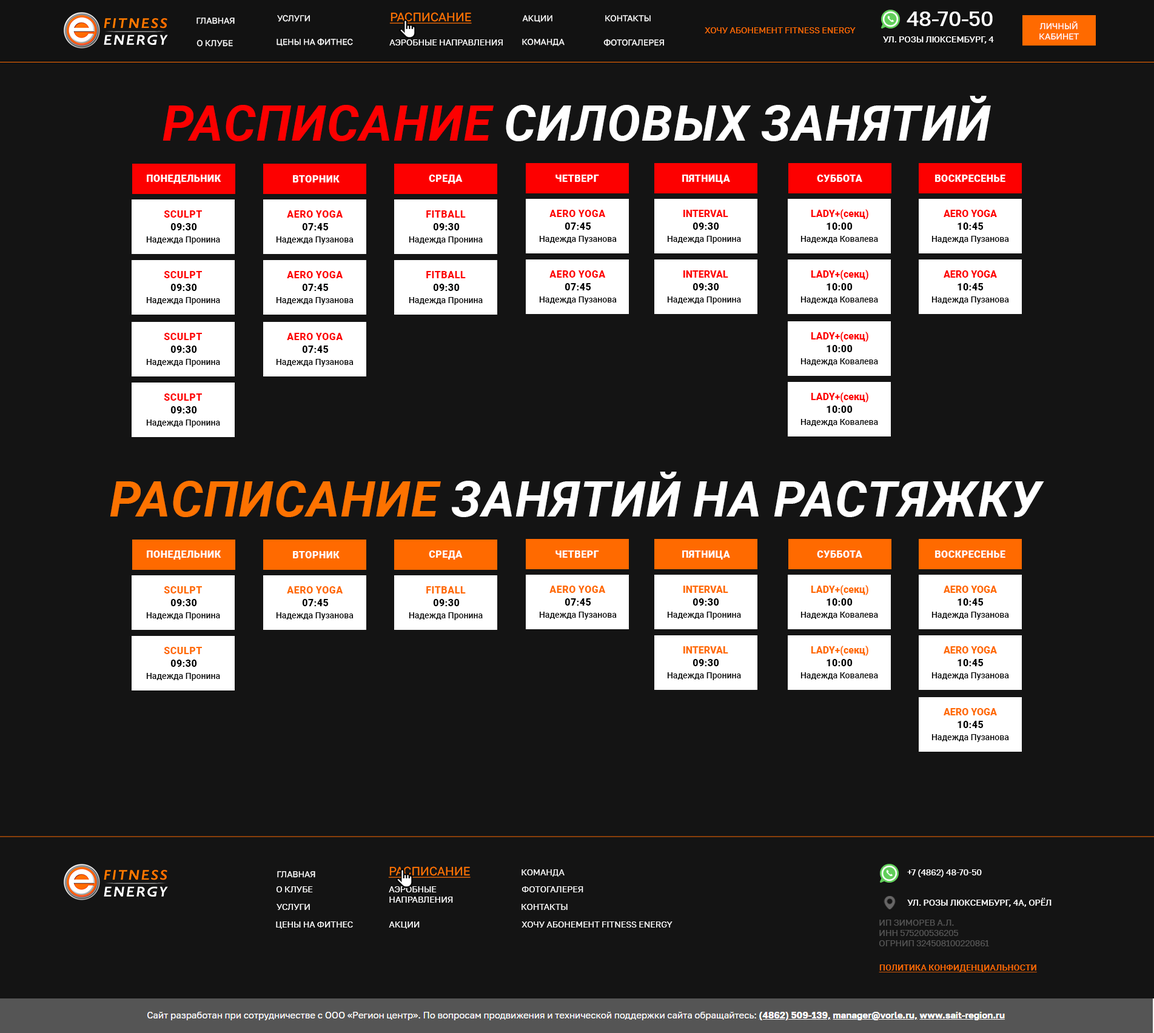
<style>
.page{position:relative;width:1154px;height:1033px;background:#141414}
.page>*{position:absolute;margin:0}
.t1{font:8.5px "GolosText-Regular";letter-spacing:-0.015em;color:#ffffff;text-transform:uppercase}
.t2{font:12.1px "GolosText-Regular";letter-spacing:-0.015em;color:#fd7200;text-transform:uppercase;text-decoration:underline}
.t3{font:20.6px "GolosText-Medium";letter-spacing:-0.015em;color:#ffffff}
.t4{font:8.5px "GolosText-Regular";letter-spacing:-0.015em;color:#ff6a00;text-transform:uppercase}
.t5{font:8.5px "GolosText-Medium";letter-spacing:-0.015em;color:#ffffff;text-transform:uppercase}
.t6{font:49.7px "Roboto-BoldItalic";letter-spacing:-0.015em;color:#ffffff;text-transform:uppercase}
.t7{font:49.7px "Roboto-BoldItalic";letter-spacing:-0.015em;color:#fd0000;text-transform:uppercase}
.t8{font:9.7px "Roboto-Black";color:#ffffff;text-transform:uppercase}
.t9{font:9.7px "Roboto-Black";color:#fd0000;text-transform:uppercase}
.t10{font:9.7px "Roboto-Black";color:#fd0000}
.t11{font:9.7px "Roboto-Black";color:#000000;text-transform:uppercase}
.t12{font:8.5px "Roboto-Medium";color:#000000}
.t13{font:49.7px "Roboto-BoldItalic";letter-spacing:-0.015em;color:#fd7200;text-transform:uppercase}
.t14{font:9.7px "Roboto-Black";color:#ff6a00;text-transform:uppercase}
.t15{font:9.7px "Roboto-Black";color:#ff6a00}
.t16{font:8.5px "GolosText-Medium";letter-spacing:-0.015em;color:#ffffff}
.t17{font:8.5px "GolosText-Regular";letter-spacing:-0.015em;color:#555555;text-transform:uppercase}
.t18{font:8.5px "Roboto-Medium";letter-spacing:-0.015em;color:#ff6a00;text-transform:uppercase;text-decoration:underline}
</style>
<div class="page">
<p class="t1" style="left:196px;top:18px;width:39px;height:6px">Главная</p>
<p class="t1" style="left:277px;top:15px;width:33px;height:7px">Услуги</p>
<p class="t2" style="left:389px;top:12px;width:83px;height:12px">Расписание</p>
<p class="t1" style="left:522px;top:15px;width:30px;height:7px">Акции</p>
<p class="t1" style="left:605px;top:15px;width:46px;height:7px">Контакты</p>
<p class="t3" style="left:907px;top:12px;width:86px;height:14px">48-70-50</p>
<p class="t4" style="left:705px;top:27px;width:151px;height:6px">Хочу абонемент Fitness Energy</p>
<p class="t1" style="left:1039px;top:21px;width:40px;height:19px;text-align:center">Личный<br>кабинет</p>
<p class="t1" style="left:196px;top:39px;width:37px;height:8px">О клубе</p>
<p class="t1" style="left:277px;top:38px;width:76px;height:8px">Цены на фитнес</p>
<p class="t1" style="left:389px;top:39px;width:114px;height:6px">аэробные направления</p>
<p class="t1" style="left:522px;top:38px;width:43px;height:8px">Команда</p>
<p class="t1" style="left:603px;top:39px;width:61px;height:7px">Фотогалерея</p>
<p class="t5" style="left:883px;top:36px;width:111px;height:8px">ул. Розы Люксембург, 4</p>
<p class="t6" style="left:163px;top:96px;width:828px;height:45px"><span class="t7">расписание</span> силовых занятий</p>
<p class="t8" style="left:147px;top:175px;width:74px;height:9px">понедельник</p>
<p class="t8" style="left:293px;top:175px;width:47px;height:8px">вторник</p>
<p class="t8" style="left:429px;top:175px;width:34px;height:9px">среда</p>
<p class="t8" style="left:555px;top:175px;width:44px;height:7px">четверг</p>
<p class="t8" style="left:682px;top:175px;width:48px;height:9px">пятница</p>
<p class="t8" style="left:817px;top:175px;width:45px;height:7px">суббота</p>
<p class="t8" style="left:935px;top:175px;width:70px;height:7px">воскресенье</p>
<p class="t9" style="left:549px;top:210px;width:57px;height:7px">AERO YOGA</p>
<p class="t10" style="left:683px;top:210px;width:45px;height:7px">INTERVAL</p>
<p class="t10" style="left:811px;top:209px;width:57px;height:11px">LADY+(секц)</p>
<p class="t10" style="left:944px;top:210px;width:53px;height:7px">AERO YOGA</p>
<p class="t9" style="left:164px;top:210px;width:38px;height:8px">SCULPT</p>
<p class="t9" style="left:287px;top:210px;width:56px;height:8px">AERO YOGA</p>
<p class="t9" style="left:426px;top:210px;width:40px;height:8px">FITBALL</p>
<p class="t11" style="left:170px;top:223px;width:27px;height:7px">09:30</p>
<p class="t11" style="left:302px;top:223px;width:27px;height:7px">07:45</p>
<p class="t11" style="left:433px;top:223px;width:27px;height:7px">09:30</p>
<p class="t11" style="left:565px;top:223px;width:26px;height:7px">07:45</p>
<p class="t11" style="left:693px;top:223px;width:26px;height:7px">09:30</p>
<p class="t11" style="left:827px;top:223px;width:26px;height:7px">10:00</p>
<p class="t11" style="left:958px;top:223px;width:26px;height:7px">10:45</p>
<p class="t12" style="left:146px;top:236px;width:74px;height:8px">Надежда Пронина</p>
<p class="t12" style="left:276px;top:236px;width:78px;height:8px">Надежда Пузанова</p>
<p class="t12" style="left:409px;top:236px;width:74px;height:8px">Надежда Пронина</p>
<p class="t12" style="left:539px;top:236px;width:78px;height:8px">Надежда Пузанова</p>
<p class="t12" style="left:667px;top:236px;width:74px;height:8px">Надежда Пронина</p>
<p class="t12" style="left:800px;top:236px;width:78px;height:7px">Надежда Ковалева</p>
<p class="t12" style="left:931px;top:236px;width:78px;height:8px">Надежда Пузанова</p>
<p class="t10" style="left:811px;top:270px;width:57px;height:10px">LADY+(секц)</p>
<p class="t9" style="left:164px;top:271px;width:38px;height:7px">SCULPT</p>
<p class="t9" style="left:287px;top:271px;width:56px;height:7px">AERO YOGA</p>
<p class="t9" style="left:426px;top:271px;width:40px;height:7px">FITBALL</p>
<p class="t9" style="left:549px;top:270px;width:57px;height:8px">AERO YOGA</p>
<p class="t10" style="left:683px;top:270px;width:45px;height:8px">INTERVAL</p>
<p class="t10" style="left:944px;top:270px;width:53px;height:8px">AERO YOGA</p>
<p class="t11" style="left:170px;top:284px;width:27px;height:7px">09:30</p>
<p class="t11" style="left:302px;top:284px;width:27px;height:7px">07:45</p>
<p class="t11" style="left:433px;top:284px;width:27px;height:7px">09:30</p>
<p class="t11" style="left:565px;top:283px;width:26px;height:7px">07:45</p>
<p class="t11" style="left:693px;top:283px;width:26px;height:7px">09:30</p>
<p class="t11" style="left:827px;top:283px;width:26px;height:7px">10:00</p>
<p class="t11" style="left:958px;top:283px;width:26px;height:7px">10:45</p>
<p class="t12" style="left:146px;top:297px;width:74px;height:8px">Надежда Пронина</p>
<p class="t12" style="left:276px;top:297px;width:78px;height:8px">Надежда Пузанова</p>
<p class="t12" style="left:409px;top:297px;width:74px;height:8px">Надежда Пронина</p>
<p class="t12" style="left:539px;top:297px;width:78px;height:7px">Надежда Пузанова</p>
<p class="t12" style="left:667px;top:297px;width:74px;height:7px">Надежда Пронина</p>
<p class="t12" style="left:800px;top:297px;width:78px;height:7px">Надежда Ковалева</p>
<p class="t12" style="left:931px;top:297px;width:78px;height:7px">Надежда Пузанова</p>
<p class="t9" style="left:164px;top:333px;width:38px;height:7px">SCULPT</p>
<p class="t9" style="left:287px;top:333px;width:56px;height:7px">AERO YOGA</p>
<p class="t10" style="left:811px;top:332px;width:57px;height:10px">LADY+(секц)</p>
<p class="t11" style="left:170px;top:346px;width:27px;height:7px">09:30</p>
<p class="t11" style="left:302px;top:346px;width:27px;height:7px">07:45</p>
<p class="t11" style="left:827px;top:345px;width:26px;height:7px">10:00</p>
<p class="t12" style="left:146px;top:359px;width:74px;height:8px">Надежда Пронина</p>
<p class="t12" style="left:276px;top:359px;width:78px;height:8px">Надежда Пузанова</p>
<p class="t12" style="left:800px;top:358px;width:78px;height:8px">Надежда Ковалева</p>
<p class="t9" style="left:164px;top:394px;width:38px;height:7px">SCULPT</p>
<p class="t10" style="left:811px;top:392px;width:57px;height:11px">LADY+(секц)</p>
<p class="t11" style="left:170px;top:406px;width:27px;height:8px">09:30</p>
<p class="t11" style="left:827px;top:406px;width:26px;height:7px">10:00</p>
<p class="t12" style="left:146px;top:420px;width:74px;height:8px">Надежда Пронина</p>
<p class="t12" style="left:800px;top:419px;width:78px;height:7px">Надежда Ковалева</p>
<p class="t6" style="left:110px;top:472px;width:934px;height:45px"><span class="t13">расписание</span> занятий на растяжку</p>
<p class="t8" style="left:147px;top:551px;width:74px;height:9px">понедельник</p>
<p class="t8" style="left:293px;top:551px;width:47px;height:7px">вторник</p>
<p class="t8" style="left:429px;top:551px;width:34px;height:9px">среда</p>
<p class="t8" style="left:555px;top:551px;width:44px;height:7px">четверг</p>
<p class="t8" style="left:682px;top:551px;width:48px;height:9px">пятница</p>
<p class="t8" style="left:817px;top:551px;width:45px;height:7px">суббота</p>
<p class="t8" style="left:935px;top:551px;width:70px;height:7px">воскресенье</p>
<p class="t14" style="left:164px;top:586px;width:38px;height:8px">SCULPT</p>
<p class="t14" style="left:287px;top:586px;width:56px;height:8px">AERO YOGA</p>
<p class="t14" style="left:426px;top:586px;width:40px;height:8px">FITBALL</p>
<p class="t14" style="left:549px;top:586px;width:57px;height:7px">AERO YOGA</p>
<p class="t15" style="left:683px;top:586px;width:45px;height:7px">INTERVAL</p>
<p class="t15" style="left:811px;top:585px;width:57px;height:10px">LADY+(секц)</p>
<p class="t15" style="left:944px;top:586px;width:53px;height:7px">AERO YOGA</p>
<p class="t11" style="left:170px;top:599px;width:27px;height:7px">09:30</p>
<p class="t11" style="left:302px;top:599px;width:27px;height:7px">07:45</p>
<p class="t11" style="left:433px;top:599px;width:27px;height:7px">09:30</p>
<p class="t11" style="left:565px;top:599px;width:26px;height:7px">07:45</p>
<p class="t11" style="left:693px;top:599px;width:26px;height:7px">09:30</p>
<p class="t11" style="left:827px;top:599px;width:26px;height:7px">10:00</p>
<p class="t11" style="left:958px;top:599px;width:26px;height:7px">10:45</p>
<p class="t12" style="left:146px;top:612px;width:74px;height:8px">Надежда Пронина</p>
<p class="t12" style="left:276px;top:612px;width:78px;height:8px">Надежда Пузанова</p>
<p class="t12" style="left:409px;top:612px;width:74px;height:8px">Надежда Пронина</p>
<p class="t12" style="left:539px;top:612px;width:78px;height:8px">Надежда Пузанова</p>
<p class="t12" style="left:667px;top:612px;width:74px;height:8px">Надежда Пронина</p>
<p class="t12" style="left:800px;top:612px;width:78px;height:7px">Надежда Ковалева</p>
<p class="t12" style="left:931px;top:612px;width:78px;height:8px">Надежда Пузанова</p>
<p class="t14" style="left:164px;top:647px;width:38px;height:7px">SCULPT</p>
<p class="t15" style="left:683px;top:646px;width:45px;height:8px">INTERVAL</p>
<p class="t15" style="left:811px;top:646px;width:57px;height:10px">LADY+(секц)</p>
<p class="t15" style="left:944px;top:646px;width:53px;height:8px">AERO YOGA</p>
<p class="t11" style="left:170px;top:660px;width:27px;height:7px">09:30</p>
<p class="t11" style="left:693px;top:659px;width:26px;height:7px">09:30</p>
<p class="t11" style="left:827px;top:659px;width:26px;height:7px">10:00</p>
<p class="t11" style="left:958px;top:659px;width:26px;height:7px">10:45</p>
<p class="t12" style="left:146px;top:673px;width:74px;height:8px">Надежда Пронина</p>
<p class="t12" style="left:667px;top:673px;width:74px;height:7px">Надежда Пронина</p>
<p class="t12" style="left:800px;top:673px;width:78px;height:7px">Надежда Ковалева</p>
<p class="t12" style="left:931px;top:673px;width:78px;height:7px">Надежда Пузанова</p>
<p class="t15" style="left:944px;top:708px;width:53px;height:8px">AERO YOGA</p>
<p class="t11" style="left:958px;top:721px;width:26px;height:7px">10:45</p>
<p class="t12" style="left:931px;top:734px;width:78px;height:8px">Надежда Пузанова</p>
<p class="t2" style="left:388px;top:867px;width:83px;height:11px">Расписание</p>
<p class="t1" style="left:522px;top:870px;width:43px;height:7px">Команда</p>
<p class="t16" style="left:907px;top:870px;width:75px;height:7px">+7 (4862) 48-70-50</p>
<p class="t1" style="left:277px;top:871px;width:38px;height:7px">Главная</p>
<p class="t1" style="left:277px;top:887px;width:36px;height:6px">О клубе</p>
<p class="t1" style="left:389px;top:887px;width:64px;height:16px">аэробные <br>направления</p>
<p class="t1" style="left:522px;top:887px;width:61px;height:6px">Фотогалерея</p>
<p class="t1" style="left:277px;top:904px;width:33px;height:6px">Услуги</p>
<p class="t1" style="left:522px;top:904px;width:46px;height:6px">Контакты</p>
<p class="t5" style="left:907px;top:898px;width:145px;height:9px">ул. Розы Люксембург, 4А, Орёл</p>
<p class="t1" style="left:276px;top:922px;width:77px;height:7px">Цены на фитнес</p>
<p class="t1" style="left:389px;top:922px;width:31px;height:7px">Акции</p>
<p class="t1" style="left:522px;top:922px;width:151px;height:6px">Хочу абонемент Fitness Energy</p>
<p class="t17" style="left:879px;top:920px;width:110px;height:27px">ИП Зиморев А.Л.<br>ИНН 575200536205<br>ОГРНИП 324508100220861</p>
<p class="t18" style="left:879px;top:965px;width:158px;height:8px">Политика конфиденциальности</p>
</div>
